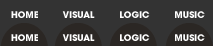
<style>
.page{position:relative;width:213px;height:46px;background:#333333}
.page>*{position:absolute;margin:0}
.t1{font:9px "AvantGarde-Bold";color:#ffffff}
</style>
<div class="page">
<p class="t1" style="left:11px;top:11px;width:194px;height:7px">HOME         VISUAL         LOGIC         MUSIC</p>
<p class="t1" style="left:11px;top:34px;width:194px;height:7px">HOME         VISUAL         LOGIC         MUSIC</p>
</div>
